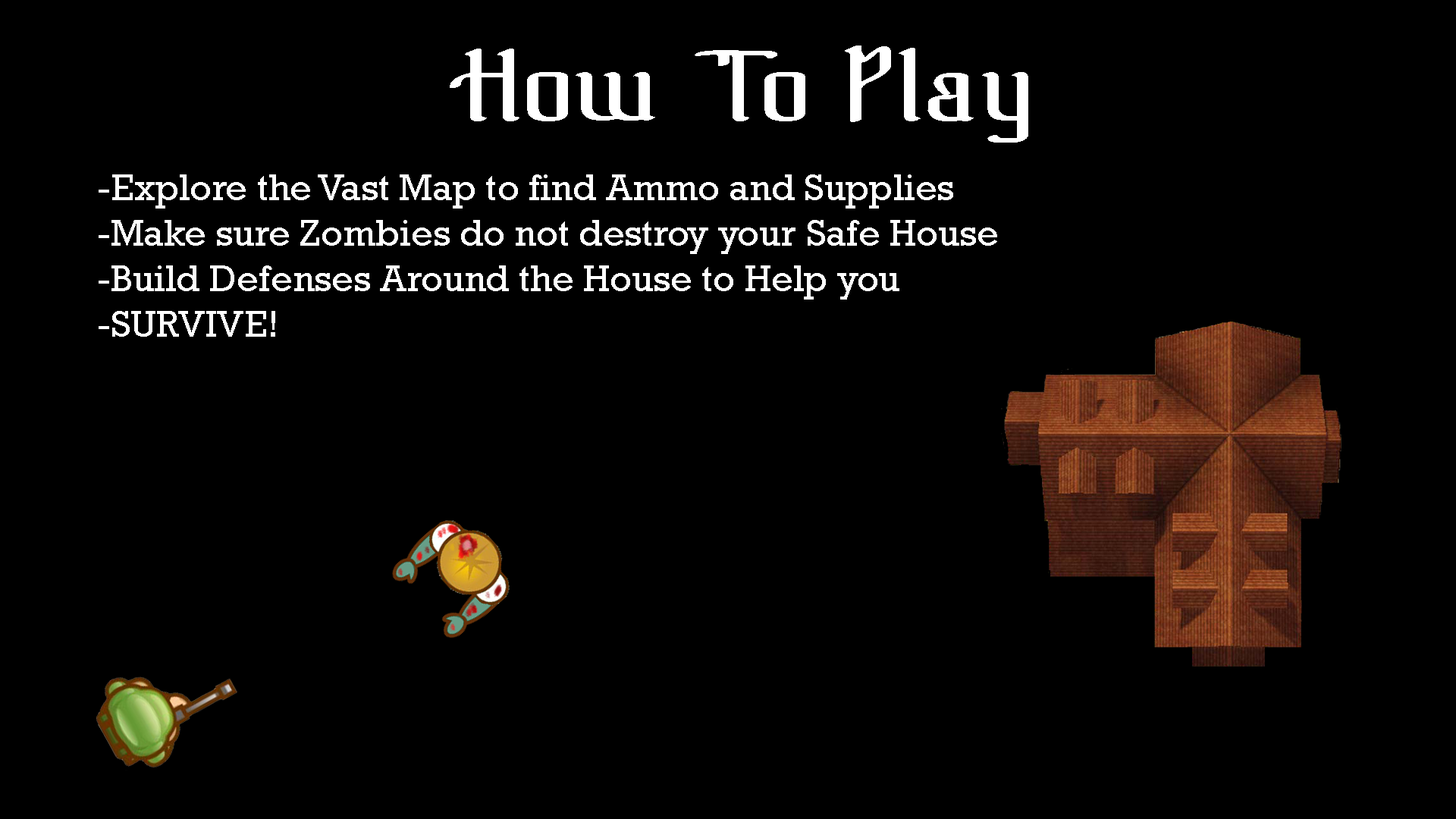
<style>
.page{position:relative;width:1456px;height:819px;background:#000000}
.page>*{position:absolute;margin:0}
.t1{font:94.8px "!TheBlackBloc";color:#ffffff}
.t2{font:37.9px "Rockwell";color:#ffffff}
</style>
<div class="page">
<p class="t1" style="left:450px;top:45px;width:578px;height:98px">How To Play</p>
<p class="t2" style="left:99px;top:174px;width:898px;height:163px">-Explore the Vast Map to find Ammo and Supplies<br>-Make sure Zombies do not destroy your Safe House<br>-Build Defenses Around the House to Help you<br>-SURVIVE!</p>
</div>
